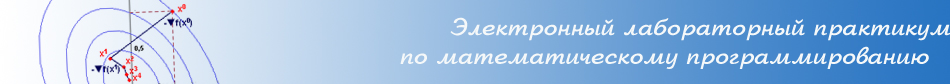
<style>
.page{position:relative;width:950px;height:84px}
.page>*{position:absolute;margin:0}
.t1{font:24px "ArbatDiBold";color:#f5f8f9}
</style>
<div class="page">
<p class="t1" style="left:400px;top:17px;width:551px;height:52px">Ýëåêòðîííûé ëàáîðàòîðíûé ïðàêòèêóì <br>ïî ìàòåìàòè÷åñêîìó ïðîãðàììèðîâàíèþ</p>
</div>
